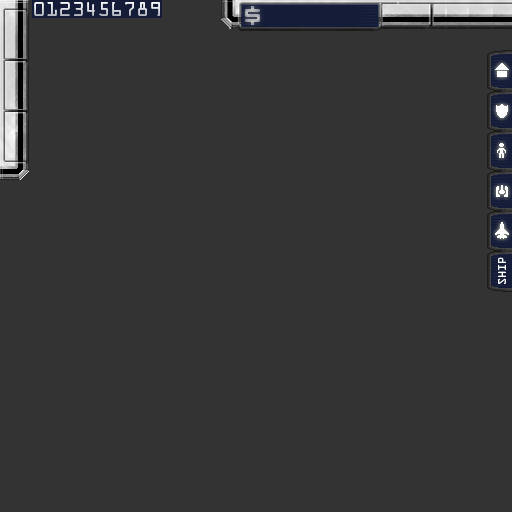
<style>
.page{position:relative;width:512px;height:512px;background:#333333}
.page>*{position:absolute;margin:0}
.t1{font:18px "OCRAStd"}
.t2{font:10px "OCRAStd";color:#ffffff}
</style>
<div class="page">
<p class="t1" style="left:34px;top:2px;width:126px;height:14px">0123456789</p>
<p class="t2" style="left:498px;top:257px;width:8px;height:27px;rotate:-90deg">SHIP</p>
</div>
